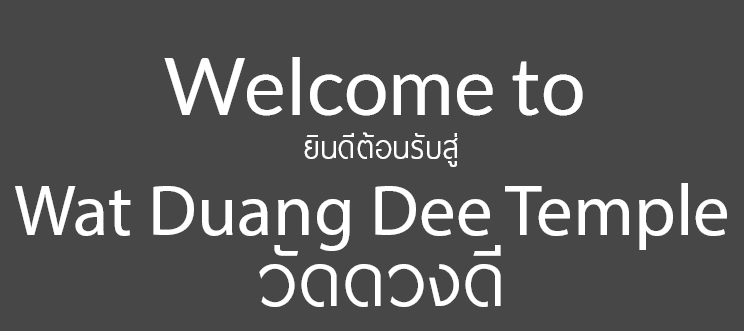
<style>
.page{position:relative;width:744px;height:331px;background:#474747}
.page>*{position:absolute;margin:0}
.t1{font:80px "Lato-Regular";color:#ffffff}
.t2{font:40px "TrueMedium";color:#ffffff}
.t3{font:73.3px "MyriadPro-Regular";color:#ffffff}
.t4{font:96px "TrueMedium";color:#ffffff}
</style>
<div class="page">
<p class="t1" style="left:164px;top:57px;width:419px;height:59px">Welcome to</p>
<p class="t2" style="left:304px;top:132px;width:154px;height:35px">ยินดีต้อนรับสู่</p>
<p class="t3" style="left:15px;top:183px;width:712px;height:68px">Wat Duang Dee Temple</p>
<p class="t4" style="left:259px;top:245px;width:242px;height:62px">วัดดวงดี</p>
</div>
